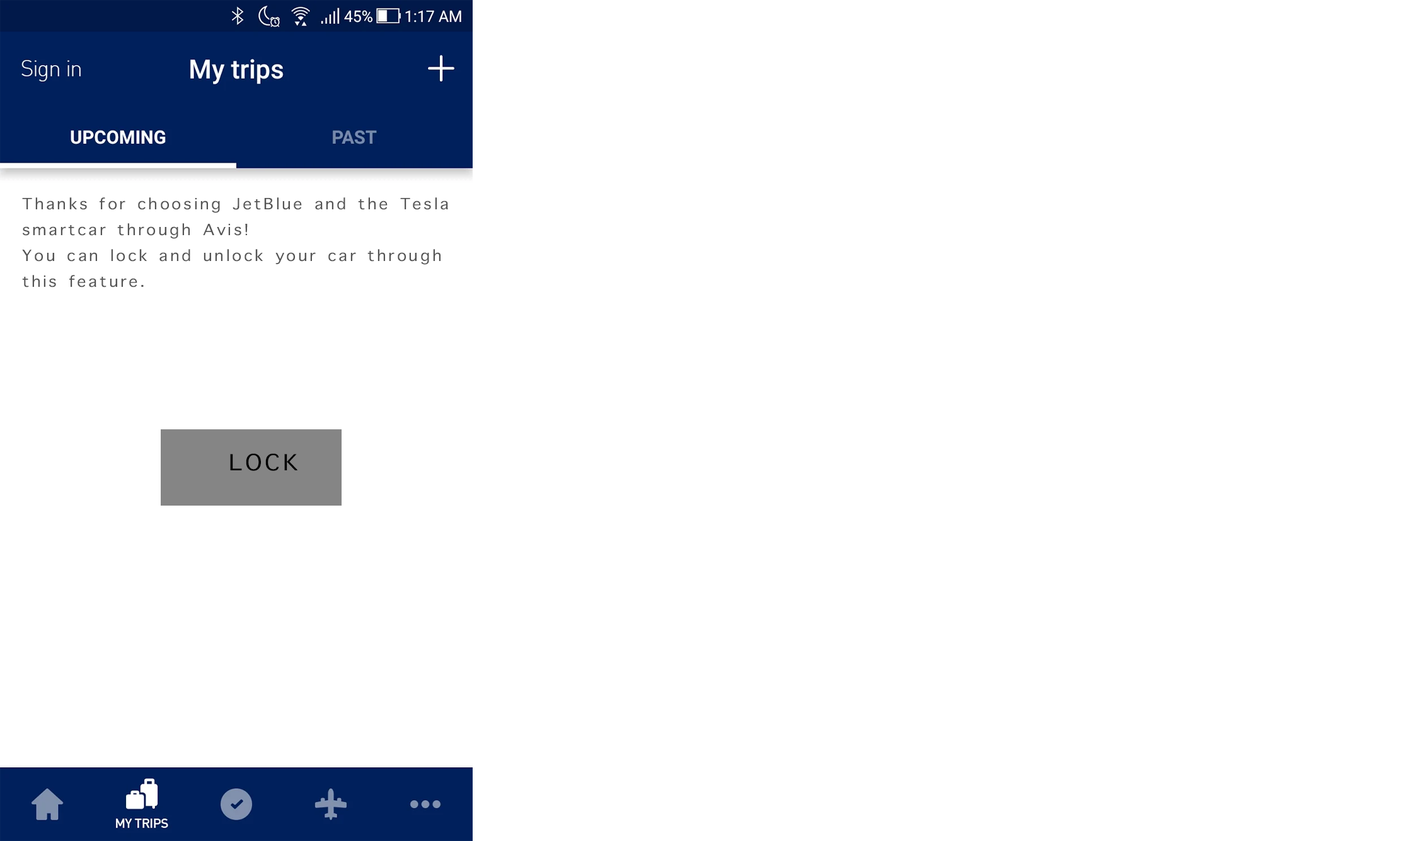
<style>
.page{position:relative;width:1418px;height:841px;background:#ffffff}
.page>*{position:absolute;margin:0}
.t1{font:21px/25.8px "AppleSymbols";letter-spacing:0.1em;color:#535353;scale:1.06 1}
.t2{font:30.3px "AppleSymbols";letter-spacing:0.1em;color:#000000;scale:1.06 1}
</style>
<div class="page">
<p class="t1" style="left:22px;top:197px;width:426px;height:90px;text-align:justify">Thanks for choosing JetBlue and the Tesla<br>smartcar through Avis! <br>You can lock and unlock your car through<br>this feature.</p>
<p class="t2" style="left:230px;top:453px;width:68px;height:18px">LOCK</p>
</div>
